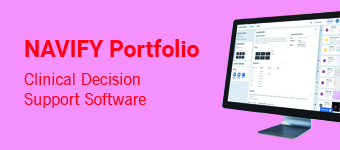
<style>
.page{position:relative;width:340px;height:150px;background:#f591fd}
.page>*{position:absolute;margin:0}
.t1{font:22.9px "Roboto-Bold";color:#ff0115}
.t2{font:16.7px "NewsGothicBT-Roman";color:#ff0115}
</style>
<div class="page">
<p class="t1" style="left:25px;top:39px;width:174px;height:18px">NAVIFY Portfolio</p>
<p class="t2" style="left:24px;top:73px;width:122px;height:35px">Clinical Decision<br>Support Software</p>
</div>
